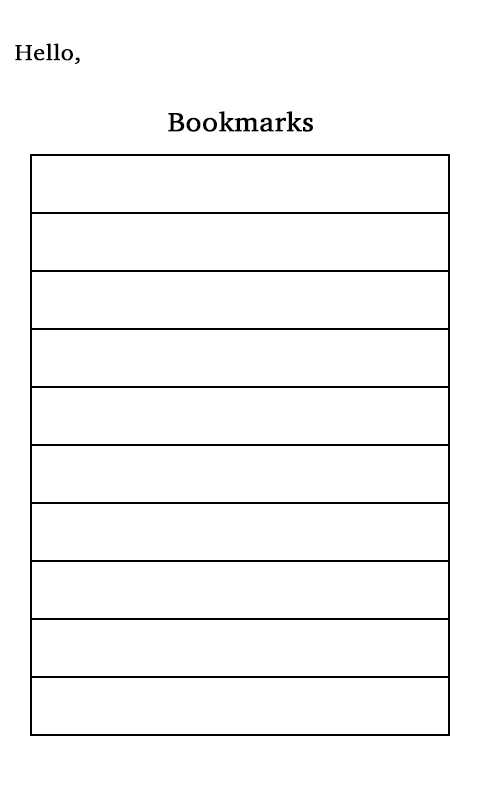
<style>
.page{position:relative;width:480px;height:800px;background:#ffffff}
.page>*{position:absolute;margin:0}
.t1{font:22.5px "Charter";color:#000000;font-weight:bold;scale:1.07 1}
.t2{font:27px "Charter";color:#000000;font-weight:bold;scale:1.07 1}
</style>
<div class="page">
<p class="t1" style="left:15px;top:43px;width:65px;height:21px">Hello,</p>
<p class="t2" style="left:168px;top:111px;width:145px;height:21px">Bookmarks</p>
</div>
